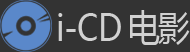
<style>
.page{position:relative;width:190px;height:52px;background:#333333}
.page>*{position:absolute;margin:0}
.t1{font:36.2px "MicrosoftYaHeiUI";letter-spacing:-0.025em;color:#d1d1d1;scale:0.88 1}
.t2{font:36.2px "MicrosoftYaHeiUI";letter-spacing:-0.04em;color:#d1d1d1;scale:0.88 1}
</style>
<div class="page">
<p class="t1" style="left:58px;top:10px;width:132px;height:35px">i-CD <span class="t2">电影</span></p>
</div>
